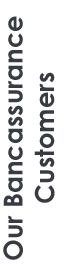
<style>
.page{position:relative;width:64px;height:280px;background:#ffffff}
.page>*{position:absolute;margin:0}
.t1{font:26.2px "CenturyGothic-Bold";color:#383c42}
</style>
<div class="page">
<p class="t1" style="left:3px;top:16px;width:52px;height:244px;text-align:center;rotate:-90deg">Our Bancassurance<br>Customers</p>
</div>
